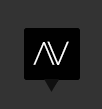
<style>
.page{position:relative;width:102px;height:109px;background:#333333}
.page>*{position:absolute;margin:0}
.t1{font:32.6px "Raleway-Light";letter-spacing:-0.01em;color:#ffffff}
.t2{font:32.3px "Raleway-Light";letter-spacing:-0.01em;color:#ffffff}
</style>
<div class="page">
<p class="t1" style="left:47px;top:41px;width:22px;height:24px">V</p>
<p class="t2" style="left:33px;top:42px;width:22px;height:23px">V</p>
</div>
